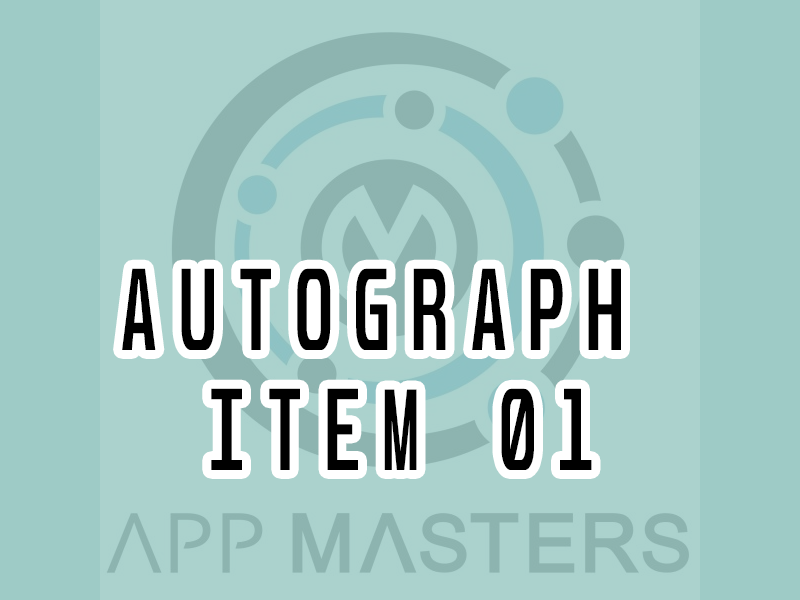
<style>
.page{position:relative;width:800px;height:600px;background:#abd2cd}
.page>*{position:absolute;margin:0}
.t1{font:100.3px/120px "Unispace-Bold";letter-spacing:0.34em;color:#000000;text-transform:uppercase;scale:0.61 1}
</style>
<div class="page">
<p class="t1" style="left:122px;top:268px;width:499px;height:202px;text-align:center">Autograph <br>Item 01</p>
</div>
